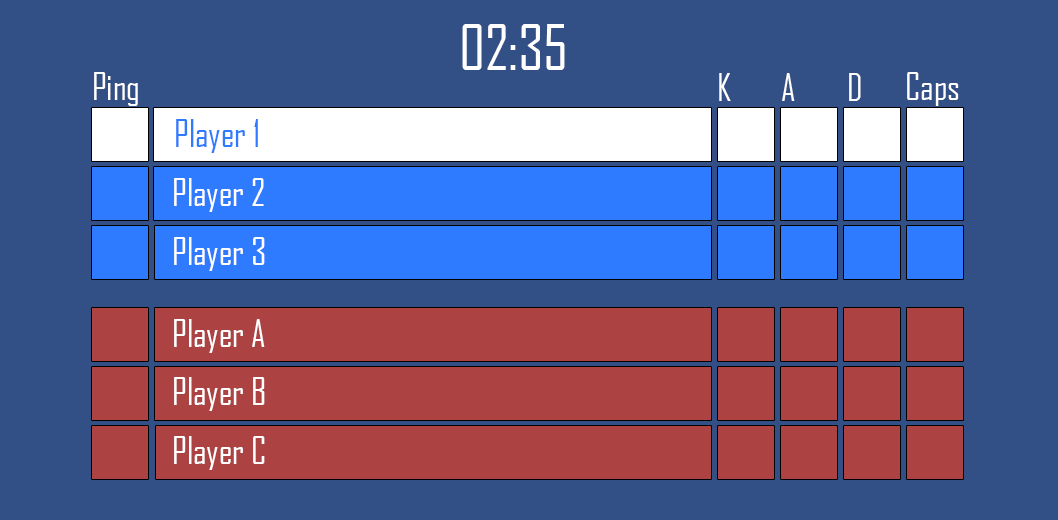
<style>
.page{position:relative;width:1058px;height:520px;background:#325085}
.page>*{position:absolute;margin:0}
.t1{font:60px "AgencyFB-Reg";color:#ffffff}
.t2{font:36px "AgencyFB-Reg";color:#ffffff}
.t3{font:36px "AgencyFB-Reg";color:#2f7bff}
</style>
<div class="page">
<p class="t1" style="left:462px;top:24px;width:103px;height:46px">02:35</p>
<p class="t2" style="left:94px;top:72px;width:44px;height:34px">Ping</p>
<p class="t2" style="left:719px;top:73px;width:12px;height:28px">K</p>
<p class="t2" style="left:782px;top:73px;width:13px;height:28px">A</p>
<p class="t2" style="left:849px;top:73px;width:12px;height:28px">D</p>
<p class="t2" style="left:907px;top:72px;width:52px;height:34px">Caps</p>
<p class="t3" style="left:176px;top:119px;width:82px;height:34px">Player 1</p>
<p class="t2" style="left:174px;top:178px;width:90px;height:34px">Player 2</p>
<p class="t2" style="left:174px;top:237px;width:91px;height:34px">Player 3</p>
<p class="t2" style="left:174px;top:319px;width:91px;height:34px">Player A</p>
<p class="t2" style="left:174px;top:377px;width:91px;height:34px">Player B</p>
<p class="t2" style="left:174px;top:436px;width:91px;height:34px">Player C</p>
</div>
